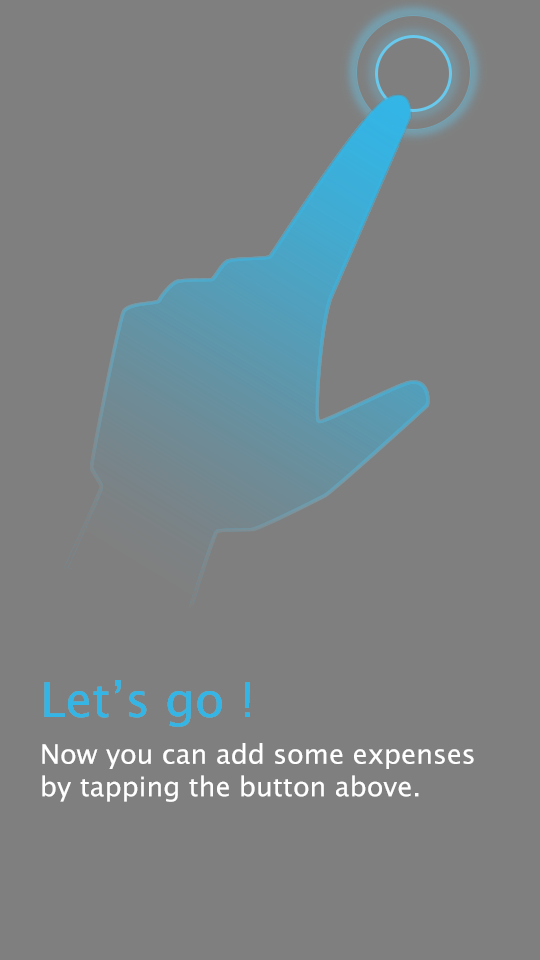
<style>
.page{position:relative;width:540px;height:960px;background:#7f7f7f}
.page>*{position:absolute;margin:0}
.t1{font:48px "LucidaSansUnicode";color:#33b5e5}
.t2{font:27px "LucidaSansUnicode";color:#ffffff}
</style>
<div class="page">
<p class="t1" style="left:44px;top:680px;width:206px;height:47px">Let’s go !</p>
<p class="t2" style="left:42px;top:743px;width:432px;height:59px">Now you can add some expenses by tapping the button above.</p>
</div>
